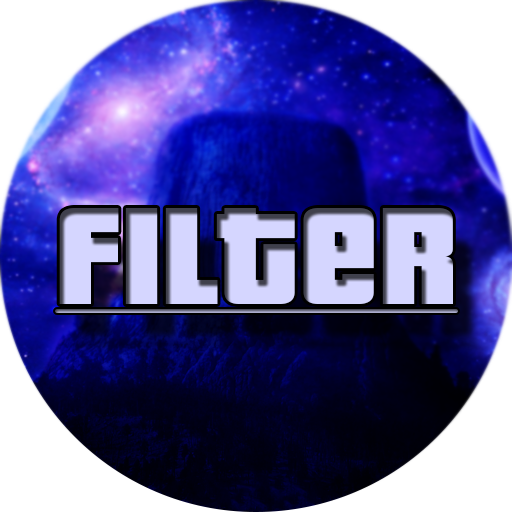
<style>
.page{position:relative;width:512px;height:512px}
.page>*{position:absolute;margin:0}
.t1{font:150px "PricedownBl-Regular";letter-spacing:0.01em;color:#d5d6ff}
</style>
<div class="page">
<p class="t1" style="left:59px;top:208px;width:394px;height:96px">Filter</p>
</div>
